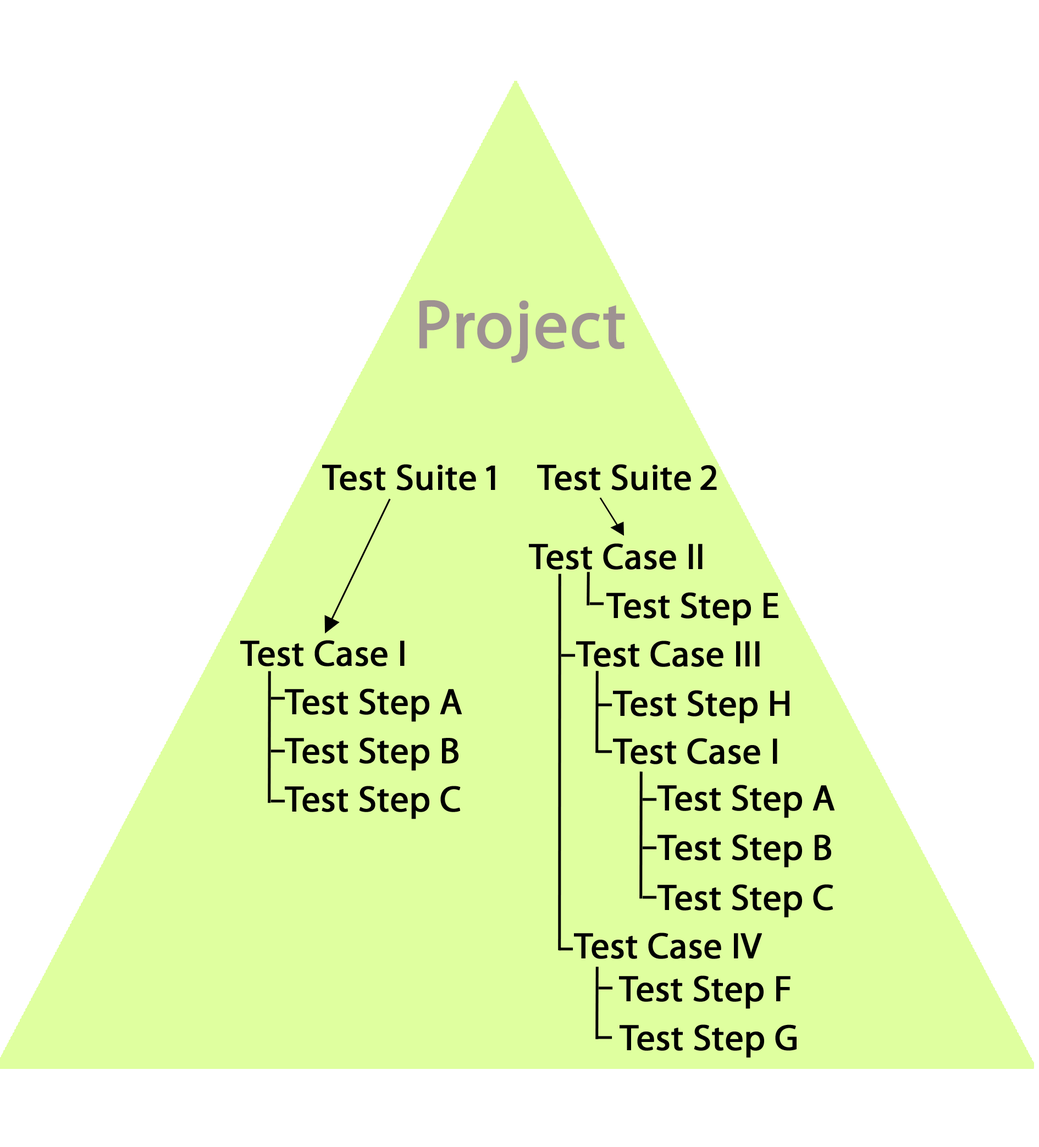
<style>
.page{position:relative;width:1039px;height:1147px;background:#ffffff}
.page>*{position:absolute;margin:0}
.t1{font:68.5px "MyriadPro-Regular";color:#9e9292;font-weight:bold}
.t2{font:36.5px "MyriadPro-Regular";color:#000000;font-weight:bold}
</style>
<div class="page">
<p class="t1" style="left:420px;top:300px;width:205px;height:63px">Project</p>
<p class="t2" style="left:322px;top:464px;width:174px;height:27px">Test Suite 1</p>
<p class="t2" style="left:537px;top:464px;width:180px;height:27px">Test Suite 2</p>
<p class="t2" style="left:529px;top:543px;width:174px;height:27px">Test Case II</p>
<p class="t2" style="left:607px;top:592px;width:172px;height:34px">Test Step E</p>
<p class="t2" style="left:240px;top:640px;width:165px;height:27px">Test Case I</p>
<p class="t2" style="left:576px;top:641px;width:184px;height:26px">Test Case III</p>
<p class="t2" style="left:285px;top:689px;width:177px;height:33px">Test Step A</p>
<p class="t2" style="left:613px;top:690px;width:177px;height:34px">Test Step H</p>
<p class="t2" style="left:285px;top:737px;width:174px;height:34px">Test Step B</p>
<p class="t2" style="left:613px;top:738px;width:165px;height:26px">Test Case I</p>
<p class="t2" style="left:285px;top:786px;width:176px;height:33px">Test Step C</p>
<p class="t2" style="left:658px;top:785px;width:177px;height:33px">Test Step A</p>
<p class="t2" style="left:658px;top:834px;width:174px;height:34px">Test Step B</p>
<p class="t2" style="left:658px;top:884px;width:176px;height:34px">Test Step C</p>
<p class="t2" style="left:574px;top:933px;width:188px;height:26px">Test Case IV</p>
<p class="t2" style="left:619px;top:976px;width:172px;height:33px">Test Step F</p>
<p class="t2" style="left:620px;top:1025px;width:177px;height:33px">Test Step G</p>
</div>
